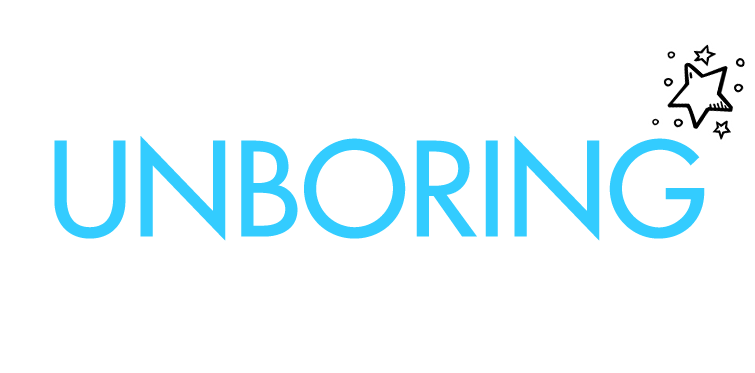
<style>
.page{position:relative;width:755px;height:373px;background:#ffffff}
.page>*{position:absolute;margin:0}
.t1{font:127.1px "FuturaStd-Medium";color:#33ccff;text-transform:uppercase}
</style>
<div class="page">
<p class="t1" style="left:54px;top:136px;width:651px;height:105px">unboring</p>
</div>
